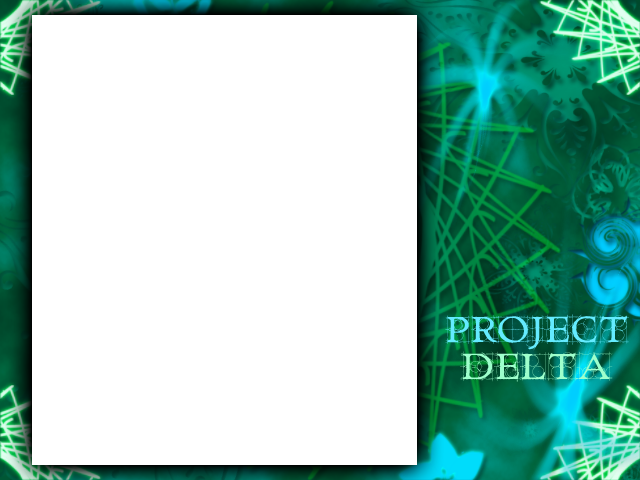
<style>
.page{position:relative;width:640px;height:480px;background:#ffffff}
.page>*{position:absolute;margin:0}
.t1{font:30px "RoughworkDemo";color:#64ebff}
.t2{font:30px "RoughworkDemo";color:#9effcc}
</style>
<div class="page">
<p class="t1" style="left:445px;top:314px;width:184px;height:37px">PROJECT</p>
<p class="t2" style="left:460px;top:351px;width:153px;height:31px">DELTA</p>
</div>
